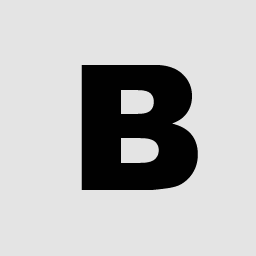
<style>
.page{position:relative;width:256px;height:256px;background:#e4e4e4}
.page>*{position:absolute;margin:0}
.t1{font:174.7px "Arial-Black";color:#010101}
</style>
<div class="page">
<p class="t1" style="left:81px;top:65px;width:117px;height:125px">B</p>
</div>
